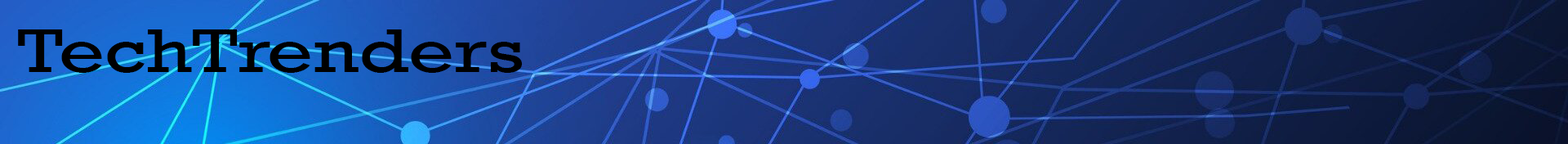
<style>
.page{position:relative;width:1568px;height:144px}
.page>*{position:absolute;margin:0}
.t1{font:62.3px "Rockwell";color:#000000;scale:1.28 1}
</style>
<div class="page">
<p class="t1" style="left:18px;top:29px;width:505px;height:44px">TechTrenders</p>
</div>
